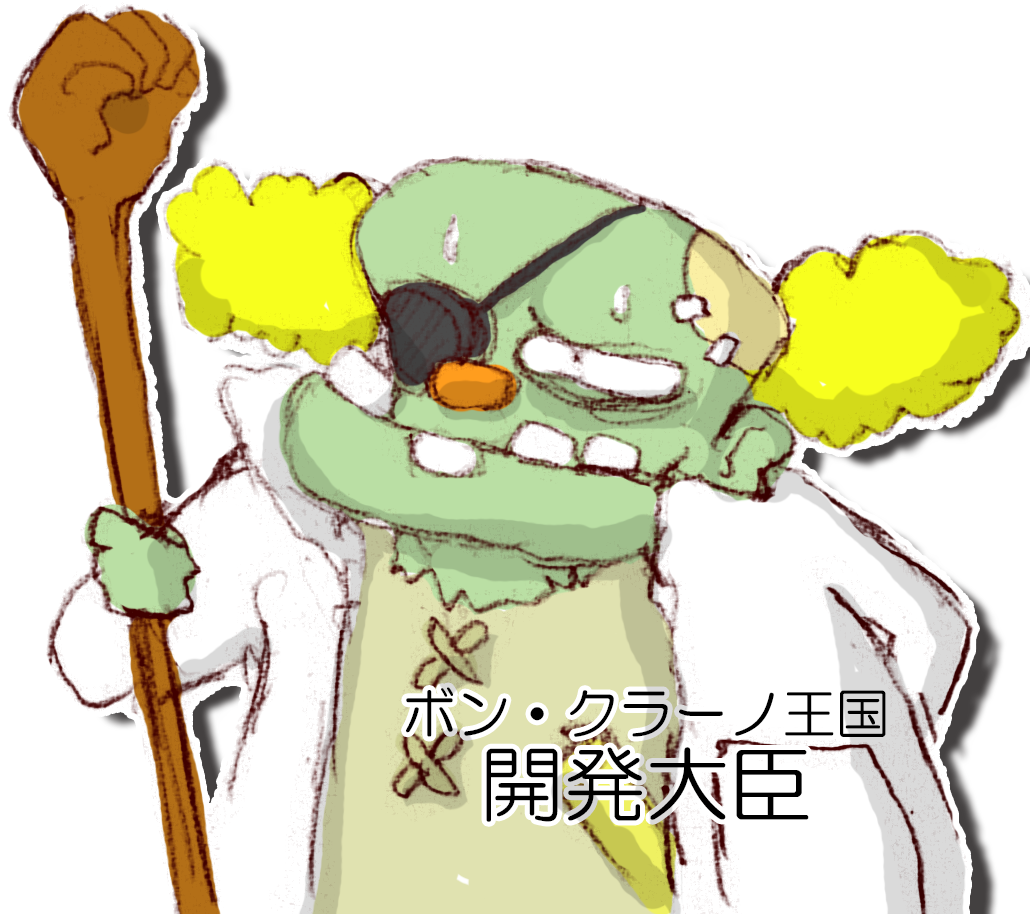
<style>
.page{position:relative;width:1030px;height:914px;background:#ffffff}
.page>*{position:absolute;margin:0}
.t1{font:54.3px/55.8px "HGMaruGothicMPRO";color:#000000}
.t2{font:83.2px "HGMaruGothicMPRO";color:#000000}
</style>
<div class="page">
<p class="t1" style="left:406px;top:687px;width:480px;height:135px;text-align:center">ボン・クラーノ王国<br><span class="t2">開発大臣</span></p>
</div>
